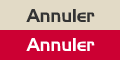
<style>
.page{position:relative;width:120px;height:60px;background:#e2dac6}
.page>*{position:absolute;margin:0}
.t1{font:18px "Newtown";color:#333333}
.t2{font:18px "Newtown";color:#ffffff}
</style>
<div class="page">
<p class="t1" style="left:26px;top:9px;width:69px;height:13px">Annuler</p>
<p class="t2" style="left:26px;top:38px;width:69px;height:13px">Annuler</p>
</div>
